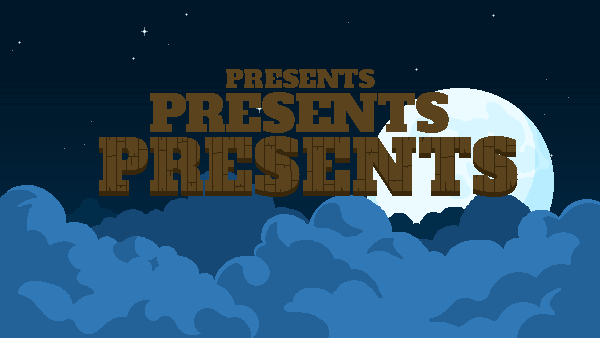
<style>
.page{position:relative;width:600px;height:338px;background:#001729}
.page>*{position:absolute;margin:0}
.t1{font:25px "AlfaSlabOne-Regular";letter-spacing:-0.02em;color:#5b441d}
.t2{font:50px "AlfaSlabOne-Regular";letter-spacing:-0.02em;color:#5b441d}
</style>
<div class="page">
<p class="t1" style="left:226px;top:69px;width:149px;height:19px">PRESENTS</p>
<p class="t2" style="left:150px;top:92px;width:299px;height:41px">PRESENTS</p>
</div>
